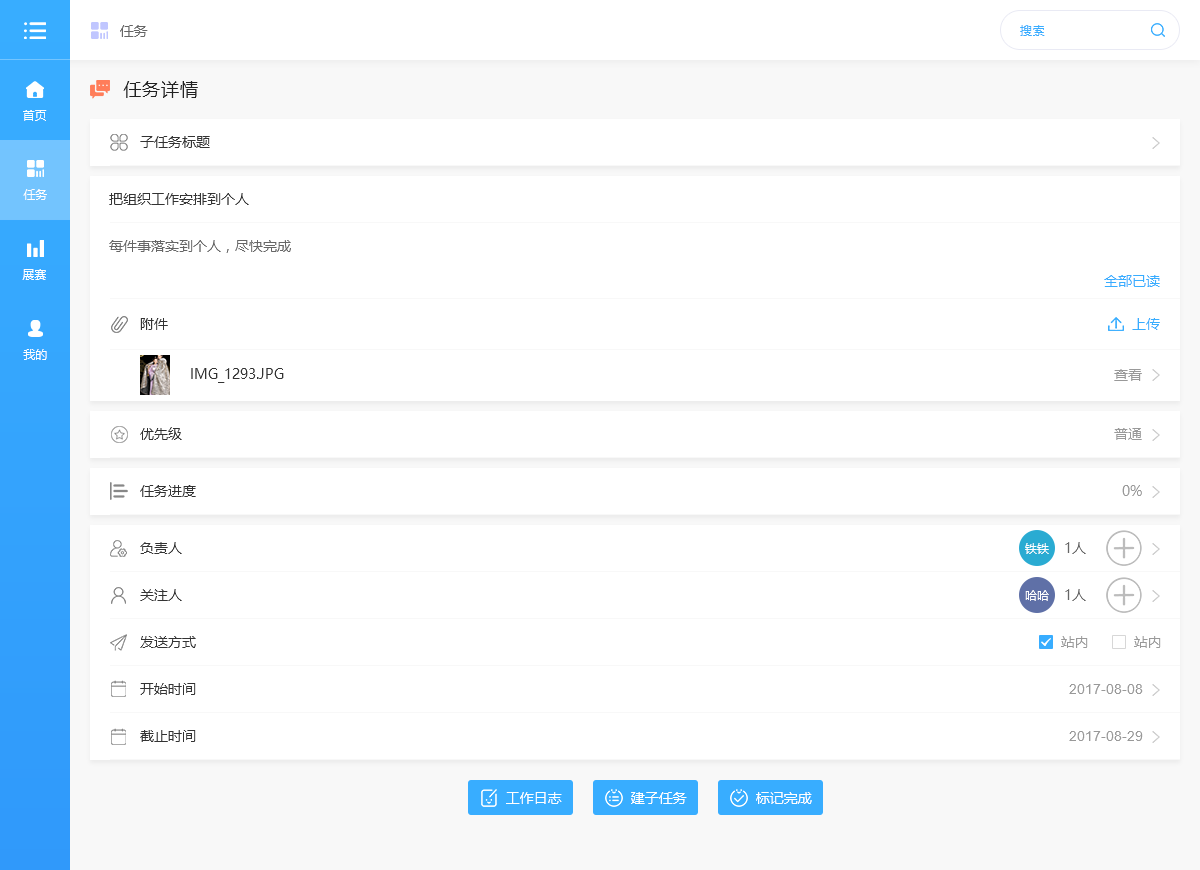
<style>
.page{position:relative;width:1200px;height:870px;background:#ffffff}
.page>*{position:absolute;margin:0}
.t1{font:14px "MicrosoftYaHei";color:#666666}
.t2{font:12px "MicrosoftYaHei";letter-spacing:0.05em;color:#38adff}
.t3{font:18px "MicrosoftYaHei";letter-spacing:0.05em;color:#222222}
.t4{font:12px "MicrosoftYaHei";color:#ffffff}
.t5{font:14px "MicrosoftYaHei";color:#333333}
.t6{font:14px "MicrosoftYaHei";color:#38adff}
.t7{font:14px "MicrosoftYaHei";color:#999999}
.t8{font:14px "ArialMT";color:#999999}
.t9{font:14px "MicrosoftYaHei";color:#ffffff}
</style>
<div class="page">
<p class="t1" style="left:120px;top:25px;width:28px;height:12px">任务</p>
<p class="t2" style="left:1020px;top:25px;width:25px;height:11px">搜索</p>
<p class="t3" style="left:123px;top:81px;width:75px;height:17px">任务详情</p>
<p class="t4" style="left:23px;top:110px;width:24px;height:11px">首页</p>
<p class="t5" style="left:140px;top:136px;width:70px;height:12px">子任务标题</p>
<p class="t4" style="left:23px;top:189px;width:24px;height:11px">任务</p>
<p class="t5" style="left:109px;top:193px;width:140px;height:12px">把组织工作安排到个人</p>
<p class="t1" style="left:109px;top:240px;width:182px;height:13px">每件事落实到个人，尽快完成</p>
<p class="t4" style="left:22px;top:269px;width:24px;height:11px">展赛</p>
<p class="t6" style="left:1104px;top:275px;width:56px;height:12px">全部已读</p>
<p class="t5" style="left:140px;top:318px;width:28px;height:12px">附件</p>
<p class="t6" style="left:1132px;top:318px;width:28px;height:12px">上传</p>
<p class="t4" style="left:23px;top:349px;width:24px;height:11px">我的</p>
<p class="t5" style="left:191px;top:368px;width:93px;height:15px">IMG_1293.JPG</p>
<p class="t7" style="left:1114px;top:369px;width:28px;height:12px">查看</p>
<p class="t5" style="left:140px;top:427px;width:42px;height:13px">优先级</p>
<p class="t7" style="left:1114px;top:428px;width:28px;height:12px">普通</p>
<p class="t5" style="left:140px;top:485px;width:56px;height:12px">任务进度</p>
<p class="t7" style="left:1122px;top:485px;width:20px;height:11px">0%</p>
<p class="t5" style="left:140px;top:542px;width:42px;height:12px">负责人</p>
<p class="t4" style="left:1025px;top:543px;width:24px;height:11px">铁铁</p>
<p class="t1" style="left:1065px;top:542px;width:21px;height:12px">1人</p>
<p class="t5" style="left:140px;top:589px;width:42px;height:12px">关注人</p>
<p class="t4" style="left:1025px;top:590px;width:24px;height:11px">哈哈</p>
<p class="t1" style="left:1065px;top:589px;width:21px;height:12px">1人</p>
<p class="t5" style="left:140px;top:636px;width:56px;height:12px">发送方式</p>
<p class="t7" style="left:1061px;top:636px;width:27px;height:12px">站内</p>
<p class="t7" style="left:1134px;top:636px;width:27px;height:12px">站内</p>
<p class="t5" style="left:140px;top:683px;width:56px;height:12px">开始时间</p>
<p class="t8" style="left:1069px;top:684px;width:74px;height:10px">2017-08-08</p>
<p class="t5" style="left:140px;top:730px;width:56px;height:12px">截止时间</p>
<p class="t8" style="left:1069px;top:731px;width:74px;height:10px">2017-08-29</p>
<p class="t9" style="left:506px;top:792px;width:56px;height:12px">工作日志</p>
<p class="t9" style="left:631px;top:792px;width:56px;height:12px">建子任务</p>
<p class="t9" style="left:756px;top:792px;width:56px;height:12px">标记完成</p>
</div>
